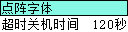
<style>
.page{position:relative;width:128px;height:32px;background:#ffffff}
.page>*{position:absolute;margin:0}
.t1{font:12.5px "SimSun";letter-spacing:0.01em;color:#040606}
</style>
<div class="page">
<p class="t1" style="left:2px;top:2px;width:50px;height:12px">点阵字体</p>
<p class="t1" style="left:2px;top:18px;width:76px;height:12px">超时关机时间</p>
<p class="t1" style="left:94px;top:18px;width:32px;height:12px">120秒</p>
</div>
